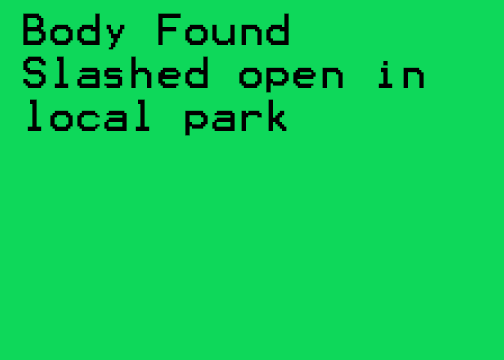
<style>
.page{position:relative;width:504px;height:360px;background:#0ed85a}
.page>*{position:absolute;margin:0}
.t1{font:36px "Terminal";color:#000000}
</style>
<div class="page">
<p class="t1" style="left:23px;top:13px;width:401px;height:123px">Body Found Slashed open in local park</p>
</div>
